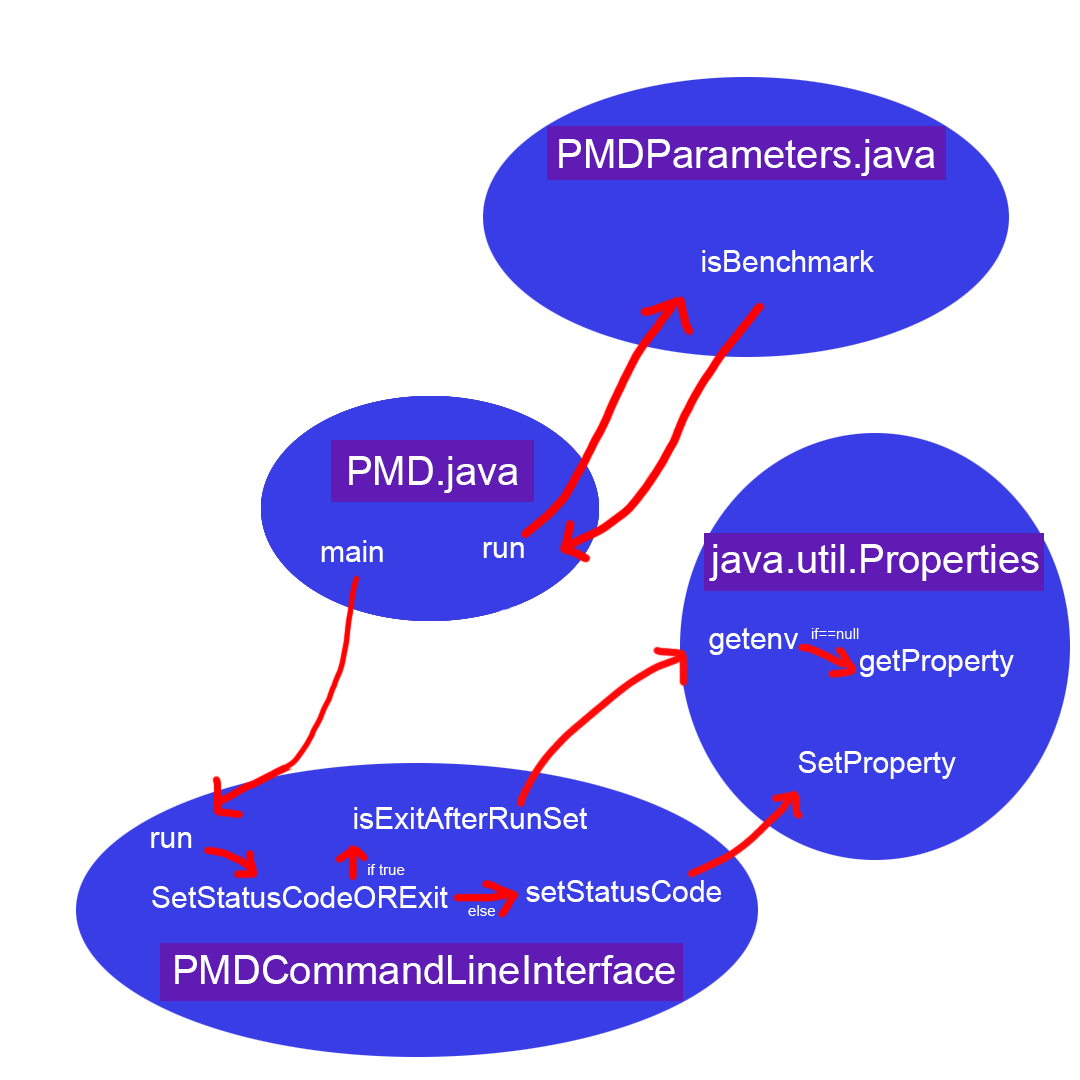
<style>
.page{position:relative;width:1080px;height:1080px;background:#ffffff}
.page>*{position:absolute;margin:0}
.t1{font:40px "ArialMT";color:#ffffff}
.t2{font:30px "ArialMT";color:#ffffff}
.t3{font:15px "ArialMT";color:#ffffff}
</style>
<div class="page">
<p class="t1" style="left:559px;top:139px;width:376px;height:37px">PMDParameters.java</p>
<p class="t2" style="left:702px;top:250px;width:172px;height:22px">isBenchmark</p>
<p class="t1" style="left:349px;top:456px;width:169px;height:37px">PMD.java</p>
<p class="t2" style="left:321px;top:540px;width:62px;height:22px">main</p>
<p class="t2" style="left:483px;top:542px;width:41px;height:16px">run</p>
<p class="t1" style="left:709px;top:544px;width:330px;height:37px">java.util.Properties</p>
<p class="t2" style="left:709px;top:627px;width:89px;height:28px">getenv</p>
<p class="t2" style="left:860px;top:649px;width:154px;height:28px">getProperty</p>
<p class="t2" style="left:798px;top:751px;width:158px;height:28px">SetProperty</p>
<p class="t2" style="left:354px;top:807px;width:233px;height:22px">isExitAfterRunSet</p>
<p class="t2" style="left:151px;top:832px;width:41px;height:16px">run</p>
<p class="t3" style="left:368px;top:864px;width:37px;height:11px">if true</p>
<p class="t2" style="left:526px;top:880px;width:195px;height:22px">setStatusCode</p>
<p class="t2" style="left:152px;top:886px;width:296px;height:22px">SetStatusCodeORExit</p>
<p class="t3" style="left:468px;top:905px;width:27px;height:11px">else</p>
<p class="t1" style="left:175px;top:955px;width:500px;height:29px">PMDCommandLineInterface</p>
</div>
